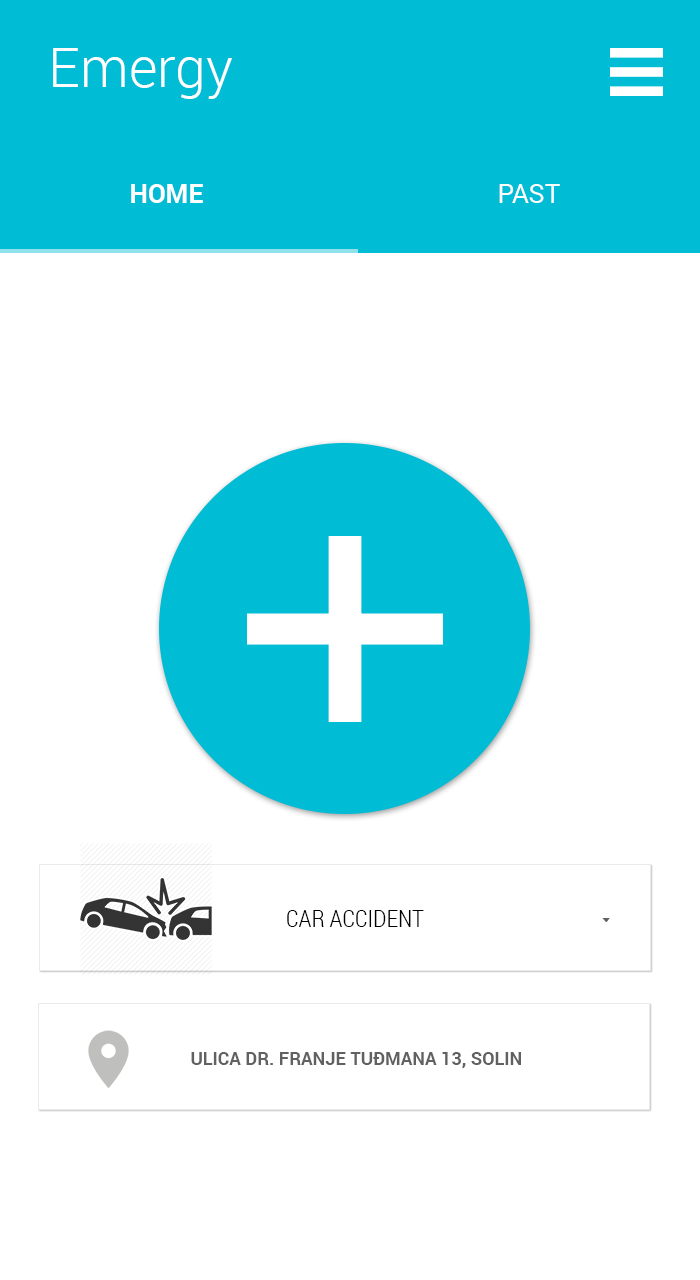
<style>
.page{position:relative;width:700px;height:1280px;background:#ffffff}
.page>*{position:absolute;margin:0}
.t1{font:55.2px "Roboto-Light";color:#fefefe}
.t2{font:26px "Roboto-Bold";color:#fefefe}
.t3{font:26px "Roboto-Regular";color:#fefefe}
.t4{font:24px "RobotoCondensed-Light";color:#000000}
.t5{font:18px "Roboto-Bold";color:#616161}
</style>
<div class="page">
<p class="t1" style="left:53px;top:48px;width:179px;height:51px">Emergy</p>
<p class="t2" style="left:131px;top:184px;width:72px;height:19px">HOME</p>
<p class="t3" style="left:499px;top:184px;width:61px;height:19px">PAST</p>
<p class="t4" style="left:287px;top:910px;width:137px;height:17px">CAR ACCIDENT</p>
<p class="t5" style="left:191px;top:1052px;width:330px;height:16px">ULICA DR. FRANJE TUĐMANA 13, SOLIN</p>
</div>
